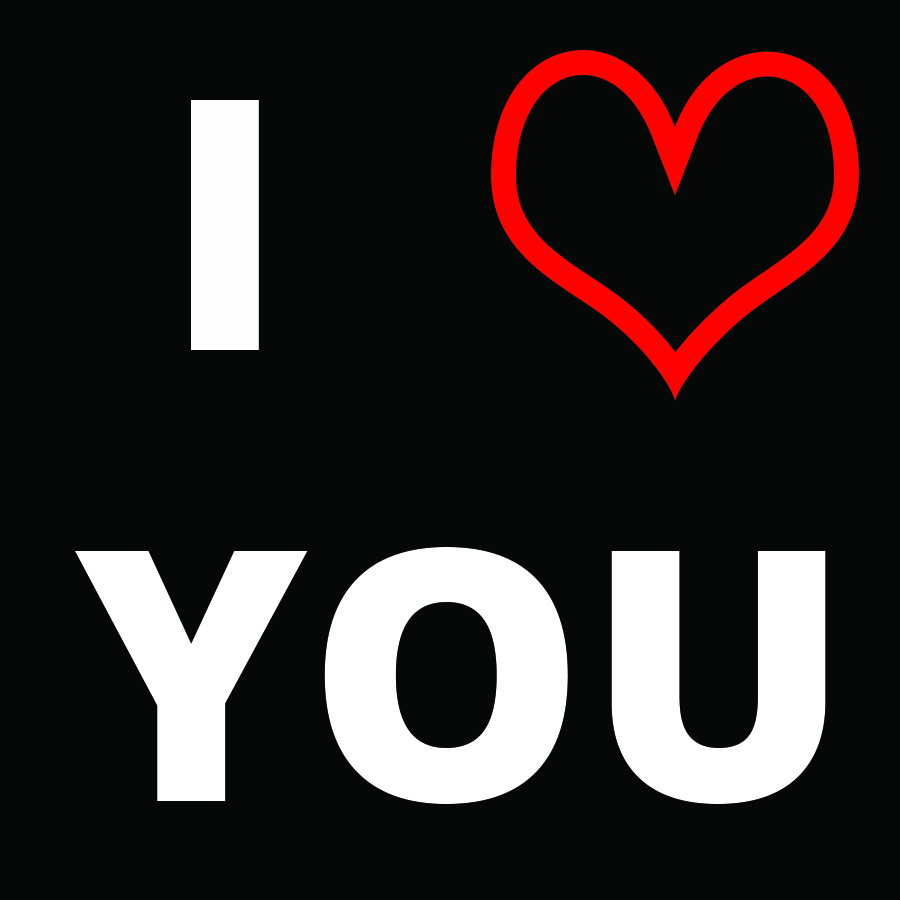
<style>
.page{position:relative;width:900px;height:900px;background:#060808}
.page>*{position:absolute;margin:0}
.t1{font:350px "OpenSans-Extrabold";color:#fffeff}
.t2{font:350px "OpenSans-Extrabold";color:#ffffff}
</style>
<div class="page">
<p class="t1" style="left:191px;top:100px;width:68px;height:250px">I</p>
<p class="t2" style="left:75px;top:547px;width:751px;height:257px">YOU</p>
</div>
